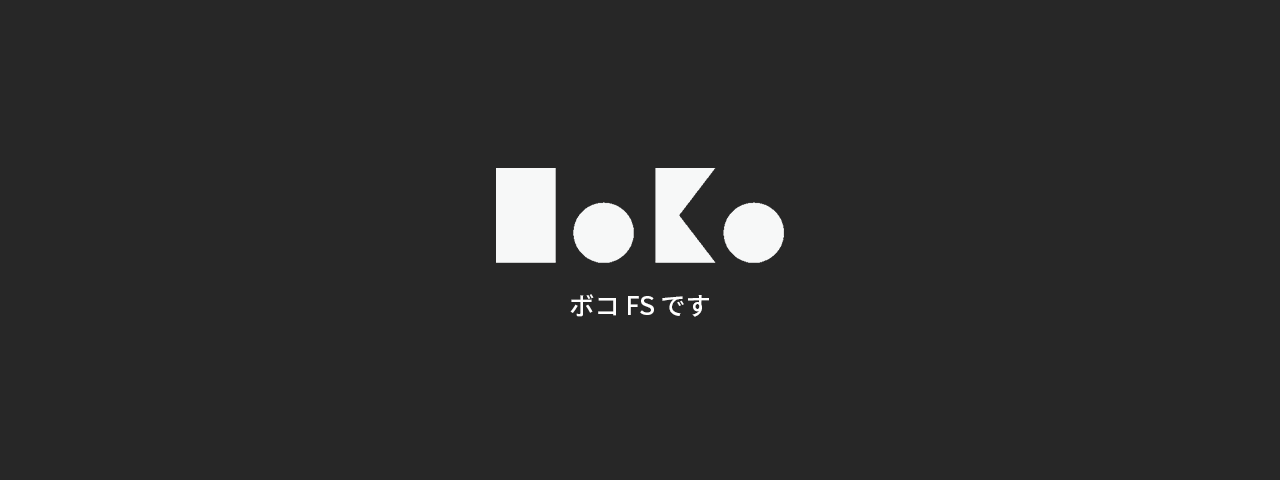
<style>
.page{position:relative;width:1280px;height:480px;background:#272727}
.page>*{position:absolute;margin:0}
.t1{font:25px "NotoSansCJKhk-Medium";color:#ffffff}
</style>
<div class="page">
<p class="t1" style="left:570px;top:294px;width:139px;height:23px">ボコ FS です</p>
</div>
